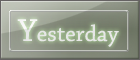
<style>
.page{position:relative;width:140px;height:60px}
.page>*{position:absolute;margin:0}
.t1{font:23.6px "ChaparralPro-Regular";color:#e7e7e7}
.t2{font:33.3px "ChaparralPro-Regular";color:#e7e7e7}
</style>
<div class="page">
<p class="t1" style="left:17px;top:19px;width:102px;height:28px"><span class="t2">Y</span>esterday</p>
</div>
